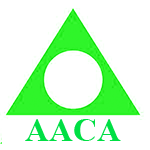
<style>
.page{position:relative;width:150px;height:150px;background:#ffffff}
.page>*{position:absolute;margin:0}
.t1{font:33.3px "TimesNewRomanPS-BoldMT";color:#00df44}
</style>
<div class="page">
<p class="t1" style="left:25px;top:119px;width:96px;height:22px">AACA</p>
</div>
